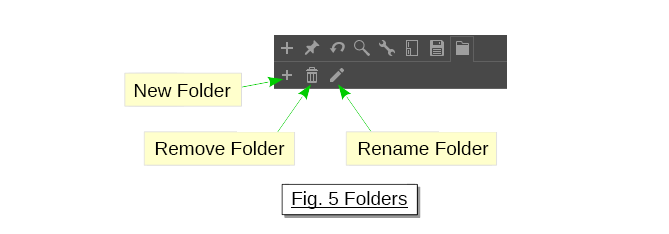
<style>
.page{position:relative;width:669px;height:234px;background:#ffffff}
.page>*{position:absolute;margin:0}
.t1{font:19px "LiberationSans";color:#000000}
</style>
<div class="page">
<p class="t1" style="left:134px;top:83px;width:97px;height:14px">New Folder</p>
<p class="t1" style="left:155px;top:141px;width:130px;height:14px">Remove Folder</p>
<p class="t1" style="left:358px;top:141px;width:131px;height:14px">Rename Folder</p>
<p class="t1" style="left:292px;top:191px;width:115px;height:18px">Fig. 5 Folders</p>
</div>
